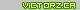
<style>
.page{position:relative;width:80px;height:10px;background:#467f00}
.page>*{position:absolute;margin:0}
.t1{font:10px "VisitorTT1BRK";color:#cdf87f}
</style>
<div class="page">
<p class="t1" style="left:23px;top:3px;width:52px;height:5px">victorz.ca</p>
</div>
